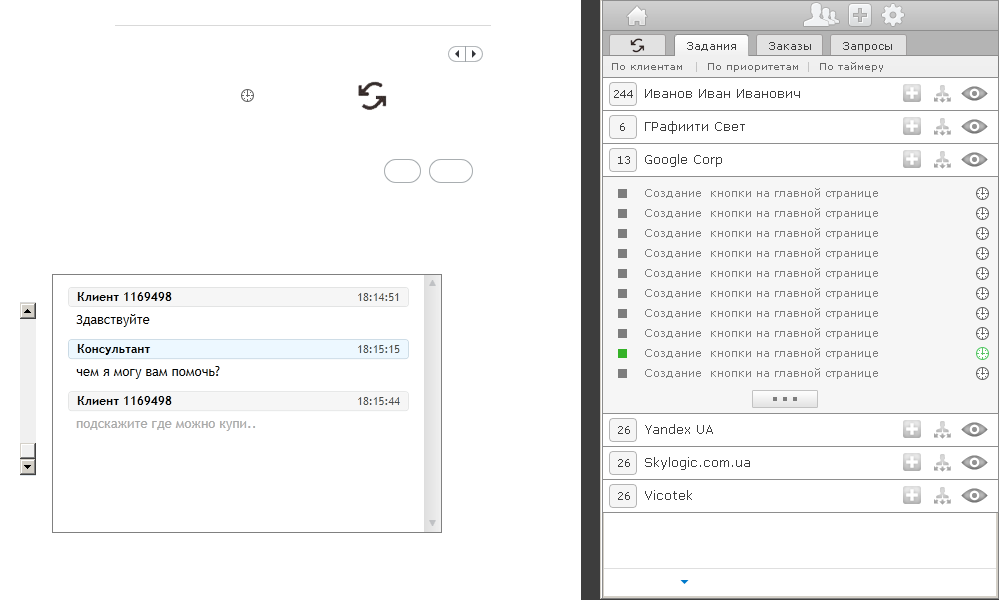
<style>
.page{position:relative;width:1000px;height:600px;background:#ffffff}
.page>*{position:absolute;margin:0}
.t1{font:11px "Verdana";color:#3d3d3d}
.t2{font:10px "Verdana";color:#696969}
.t3{font:13px "Verdana";color:#3d3d3d}
.t4{font:11px "Verdana";color:#7c7c7c}
</style>
<div class="page">
<p class="t1" style="left:687px;top:42px;width:49px;height:9px">Задания</p>
<p class="t1" style="left:769px;top:42px;width:42px;height:8px">Заказы</p>
<p class="t1" style="left:843px;top:42px;width:49px;height:10px">Запросы</p>
<p class="t2" style="left:612px;top:62px;width:271px;height:10px">По клиентам      По приоритетам     По таймеру</p>
<p class="t3" style="left:645px;top:89px;width:155px;height:9px">Иванов Иван Иванович</p>
<p class="t1" style="left:614px;top:90px;width:19px;height:8px">244</p>
<p class="t1" style="left:620px;top:123px;width:5px;height:8px">6</p>
<p class="t3" style="left:645px;top:121px;width:100px;height:13px">ГРафиити Свет</p>
<p class="t1" style="left:618px;top:156px;width:12px;height:8px">13</p>
<p class="t3" style="left:645px;top:154px;width:77px;height:13px">Google Corp</p>
<p class="t4" style="left:645px;top:188px;width:233px;height:11px">Создание  кнопки на главной странице</p>
<p class="t4" style="left:645px;top:208px;width:233px;height:11px">Создание  кнопки на главной странице</p>
<p class="t4" style="left:645px;top:228px;width:233px;height:11px">Создание  кнопки на главной странице</p>
<p class="t4" style="left:645px;top:248px;width:233px;height:11px">Создание  кнопки на главной странице</p>
<p class="t4" style="left:645px;top:268px;width:233px;height:11px">Создание  кнопки на главной странице</p>
<p class="t4" style="left:645px;top:288px;width:233px;height:11px">Создание  кнопки на главной странице</p>
<p class="t4" style="left:645px;top:308px;width:233px;height:11px">Создание  кнопки на главной странице</p>
<p class="t4" style="left:645px;top:328px;width:233px;height:11px">Создание  кнопки на главной странице</p>
<p class="t4" style="left:645px;top:348px;width:233px;height:11px">Создание  кнопки на главной странице</p>
<p class="t4" style="left:645px;top:368px;width:233px;height:11px">Создание  кнопки на главной странице</p>
<p class="t3" style="left:645px;top:424px;width:68px;height:10px">Yandex UA</p>
<p class="t1" style="left:618px;top:426px;width:12px;height:8px">26</p>
<p class="t1" style="left:618px;top:459px;width:12px;height:8px">26</p>
<p class="t3" style="left:645px;top:457px;width:105px;height:13px">Skylogic.com.ua</p>
<p class="t1" style="left:618px;top:492px;width:12px;height:8px">26</p>
<p class="t3" style="left:645px;top:490px;width:47px;height:10px">Vicotek</p>
</div>
